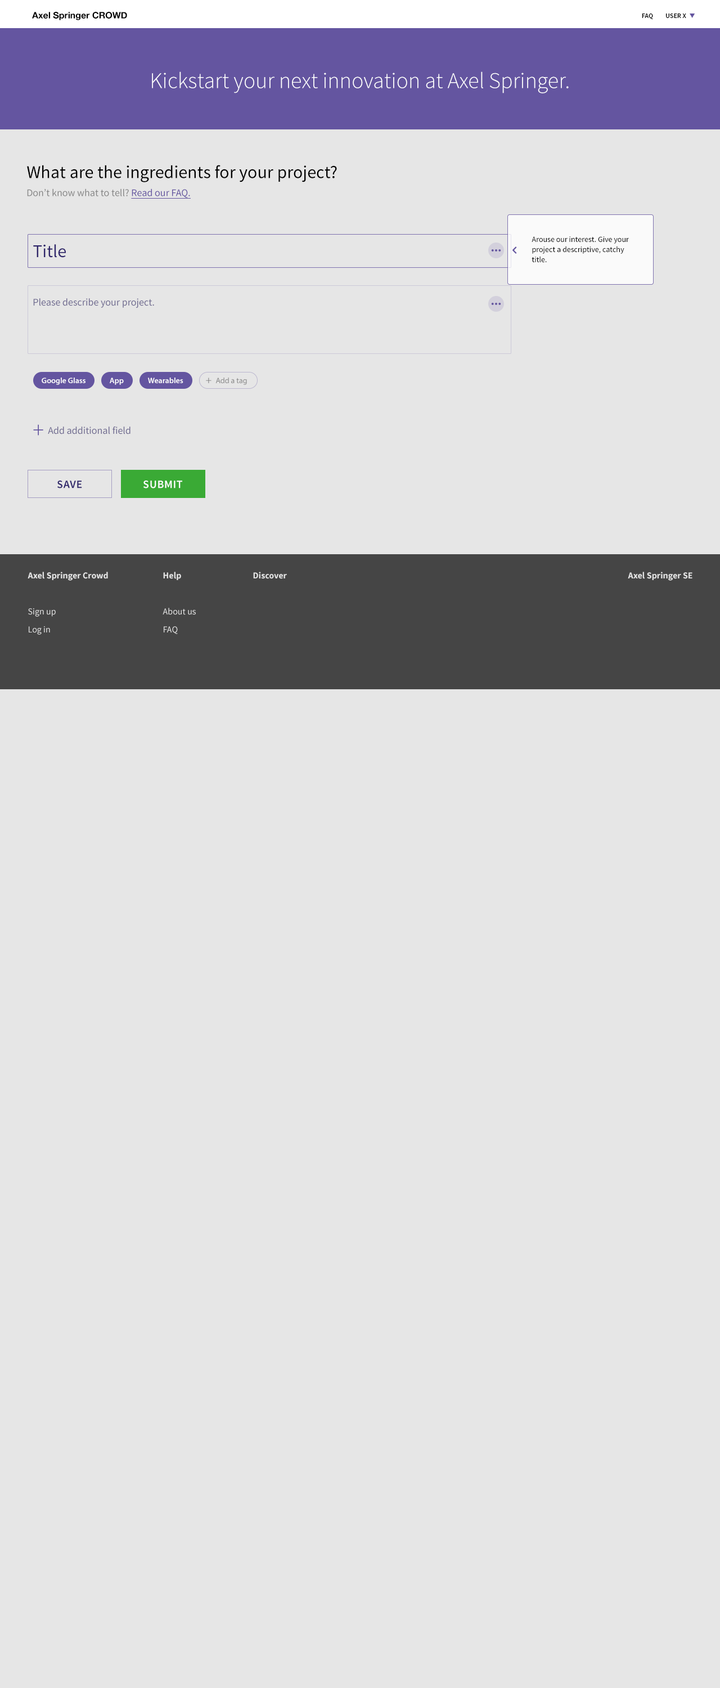
<style>
.page{position:relative;width:720px;height:1688px;background:#e6e6e6}
.page>*{position:absolute;margin:0}
.t1{font:9px "HelveticaNeue-Bold";color:#000000}
.t2{font:6.8px "SourceSansPro-Semibold";color:#000000;text-transform:uppercase}
.t3{font:22.5px "SourceSansPro-Light";color:#ffffff}
.t4{font:18px/18px "SourceSansPro-Regular";color:#000000}
.t5{font:10.1px/18px "SourceSansPro-Regular";color:#868686}
.t6{font:10.1px/18px "SourceSansPro-Regular";color:#6455a0;text-decoration:underline}
.t7{font:18px "SourceSansPro-Regular";color:#30276b}
.t8{font:7.9px/10.1px "SourceSansPro-Regular";color:#000000}
.t9{font:10.1px "SourceSansPro-Regular";color:#6f6a90}
.t10{font:7.9px "MyriadPro-Semibold";color:#ffffff}
.t11{font:10.1px "MyriadPro-Regular";color:#878787}
.t12{font:7.9px "MyriadPro-Regular";color:#878787}
.t13{font:23.6px "SourceSansPro-Light";color:#6455a0}
.t14{font:11.2px "SourceSansPro-Semibold";letter-spacing:0.032em;color:#30276b;text-transform:uppercase}
.t15{font:11.2px "SourceSansPro-Semibold";letter-spacing:0.032em;color:#ffffff;text-transform:uppercase}
.t16{font:9px/18px "SourceSansPro-Bold";color:#e2e2e2}
.t17{font:9px/18px "SourceSansPro-Regular";color:#e2e2e2}
.t18{font:9px "SourceSansPro-Bold";color:#e2e2e2}
</style>
<div class="page">
<p class="t1" style="left:32px;top:12px;width:95px;height:8px">Axel Springer CROWD</p>
<p class="t2" style="left:642px;top:14px;width:44px;height:5px">FAQ         User X</p>
<p class="t3" style="left:152px;top:71px;width:417px;height:22px">Kickstart your next innovation at Axel Springer.</p>
<p class="t4" style="left:27px;top:165px;width:310px;height:34px">What are the ingredients for your project?<br><span class="t5">Don’t know what to tell? </span><span class="t6">Read our FAQ.</span></p>
<p class="t7" style="left:33px;top:244px;width:33px;height:14px">Title</p>
<p class="t8" style="left:532px;top:236px;width:97px;height:26px">Arouse our interest. Give your project a descriptive, catchy title.</p>
<p class="t9" style="left:33px;top:298px;width:121px;height:10px">Please describe your project.</p>
<p class="t10" style="left:42px;top:377px;width:44px;height:8px">Google Glass</p>
<p class="t10" style="left:110px;top:377px;width:14px;height:8px">App</p>
<p class="t10" style="left:148px;top:377px;width:35px;height:6px">Wearables</p>
<p class="t11" style="left:206px;top:377px;width:6px;height:6px">+</p>
<p class="t12" style="left:215px;top:377px;width:32px;height:8px">Add a tag</p>
<p class="t13" style="left:33px;top:424px;width:10px;height:11px">+</p>
<p class="t9" style="left:48px;top:426px;width:82px;height:8px">Add additional field</p>
<p class="t14" style="left:57px;top:480px;width:25px;height:8px">Save</p>
<p class="t15" style="left:143px;top:480px;width:39px;height:8px">Submit</p>
<p class="t16" style="left:28px;top:572px;width:80px;height:62px">Axel Springer Crowd<br><br><span class="t17">Sign up<br>Log in</span></p>
<p class="t17" style="left:163px;top:572px;width:33px;height:62px"><span class="t16">Help<br><br></span>About us<br>FAQ</p>
<p class="t18" style="left:253px;top:572px;width:34px;height:7px">Discover</p>
<p class="t18" style="left:628px;top:572px;width:64px;height:8px">Axel Springer SE</p>
</div>
